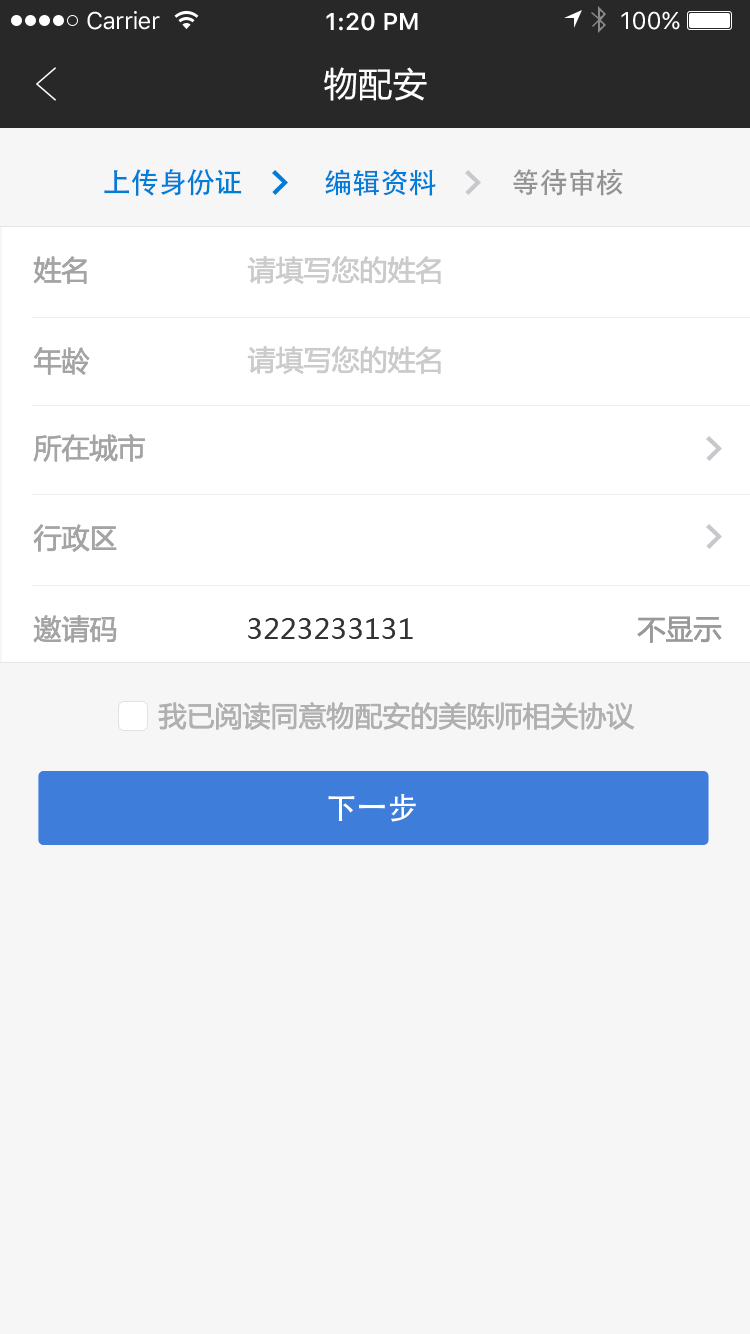
<style>
.page{position:relative;width:750px;height:1334px;background:#f6f6f6}
.page>*{position:absolute;margin:0}
.t1{font:24px "SFUIText-Regular";letter-spacing:-0.025em;color:#ffffff}
.t2{font:24px "SFUIText-Semibold";color:#ffffff}
.t3{font:24px "SFUIText-Regular";color:#ffffff}
.t4{font:34px "MicrosoftYaHei";letter-spacing:0.02em;color:#ffffff}
.t5{font:28px "AdobeHeitiStd-Regular";color:#007cd9}
.t6{font:28px "AdobeHeitiStd-Regular";color:#939393}
.t7{font:28px "MicrosoftYaHei";color:#a4a4a4}
.t8{font:28px "MicrosoftYaHei";color:#cbcbcb}
.t9{font:28px "MicrosoftYaHei";color:#999999}
.t10{font:28px "MicrosoftYaHei";color:#333333}
.t11{font:28px "MicrosoftYaHei";color:#b0b0b0}
.t12{font:30px "AdobeHeitiStd-Regular";letter-spacing:0.02em;color:#ffffff}
</style>
<div class="page">
<p class="t1" style="left:87px;top:11px;width:73px;height:19px">Carrier</p>
<p class="t2" style="left:326px;top:12px;width:92px;height:19px">1:20 PM</p>
<p class="t3" style="left:621px;top:11px;width:59px;height:19px">100%</p>
<p class="t4" style="left:324px;top:67px;width:103px;height:34px">物配安</p>
<p class="t5" style="left:104px;top:169px;width:138px;height:27px">上传身份证</p>
<p class="t5" style="left:325px;top:169px;width:111px;height:27px">编辑资料</p>
<p class="t6" style="left:513px;top:169px;width:110px;height:27px">等待审核</p>
<p class="t7" style="left:33px;top:256px;width:54px;height:28px">姓名</p>
<p class="t8" style="left:247px;top:256px;width:194px;height:28px">请填写您的姓名</p>
<p class="t7" style="left:33px;top:347px;width:57px;height:28px">年龄</p>
<p class="t8" style="left:247px;top:346px;width:194px;height:28px">请填写您的姓名</p>
<p class="t7" style="left:33px;top:434px;width:112px;height:28px">所在城市</p>
<p class="t7" style="left:33px;top:524px;width:84px;height:28px">行政区</p>
<p class="t7" style="left:33px;top:615px;width:84px;height:28px">邀请码</p>
<p class="t9" style="left:637px;top:616px;width:85px;height:27px">不显示</p>
<p class="t10" style="left:248px;top:618px;width:165px;height:21px">3223233131</p>
<p class="t11" style="left:158px;top:702px;width:477px;height:28px">我已阅读同意物配安的美陈师相关协议</p>
<p class="t12" style="left:328px;top:793px;width:88px;height:29px">下一步</p>
</div>
